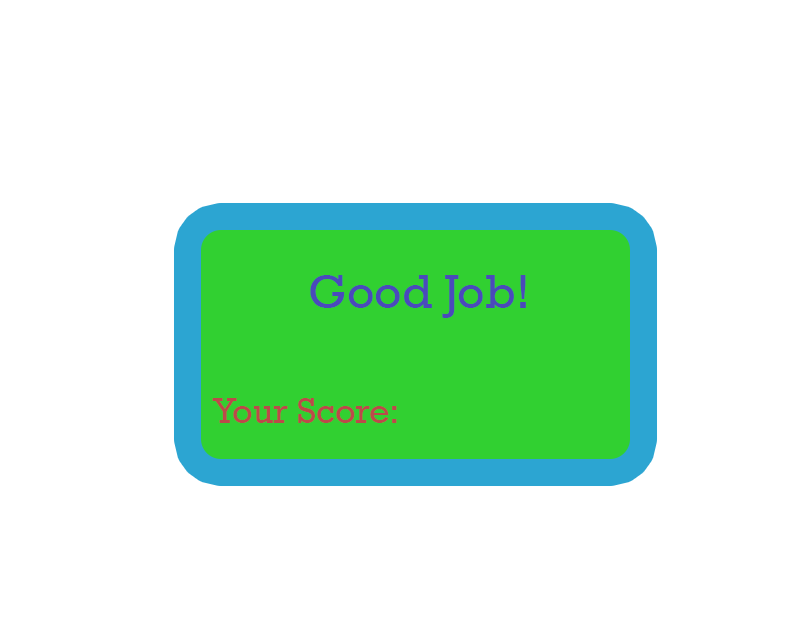
<style>
.page{position:relative;width:800px;height:640px;background:#ffffff}
.page>*{position:absolute;margin:0}
.t1{font:48px "Rockwell";color:#4a4abb}
.t2{font:36px "Rockwell";color:#bb4a4a}
</style>
<div class="page">
<p class="t1" style="left:310px;top:275px;width:216px;height:43px">Good Job!</p>
<p class="t2" style="left:212px;top:398px;width:185px;height:25px">Your Score:</p>
</div>
